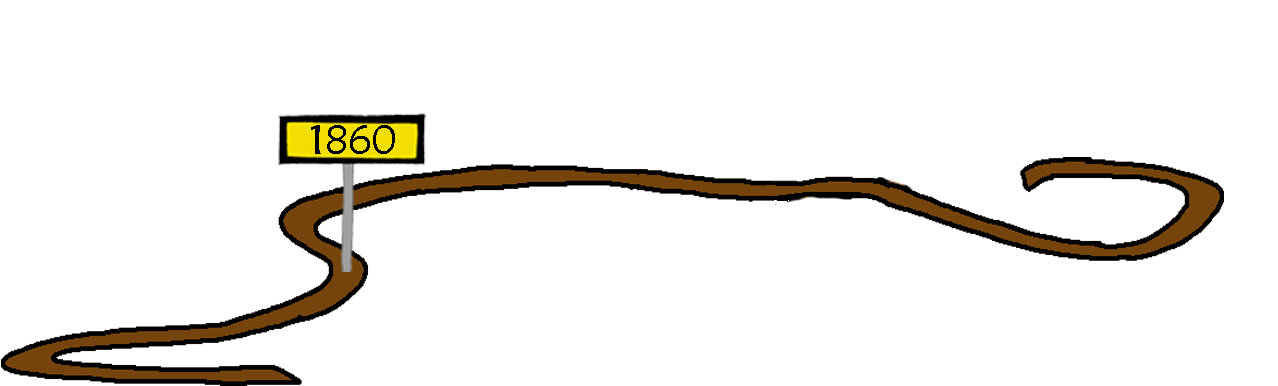
<style>
.page{position:relative;width:1278px;height:386px;background:#ffffff}
.page>*{position:absolute;margin:0}
.t1{font:41.7px "MaiandraGD-Regular";color:#000000}
</style>
<div class="page">
<p class="t1" style="left:311px;top:125px;width:84px;height:29px">1860</p>
</div>
